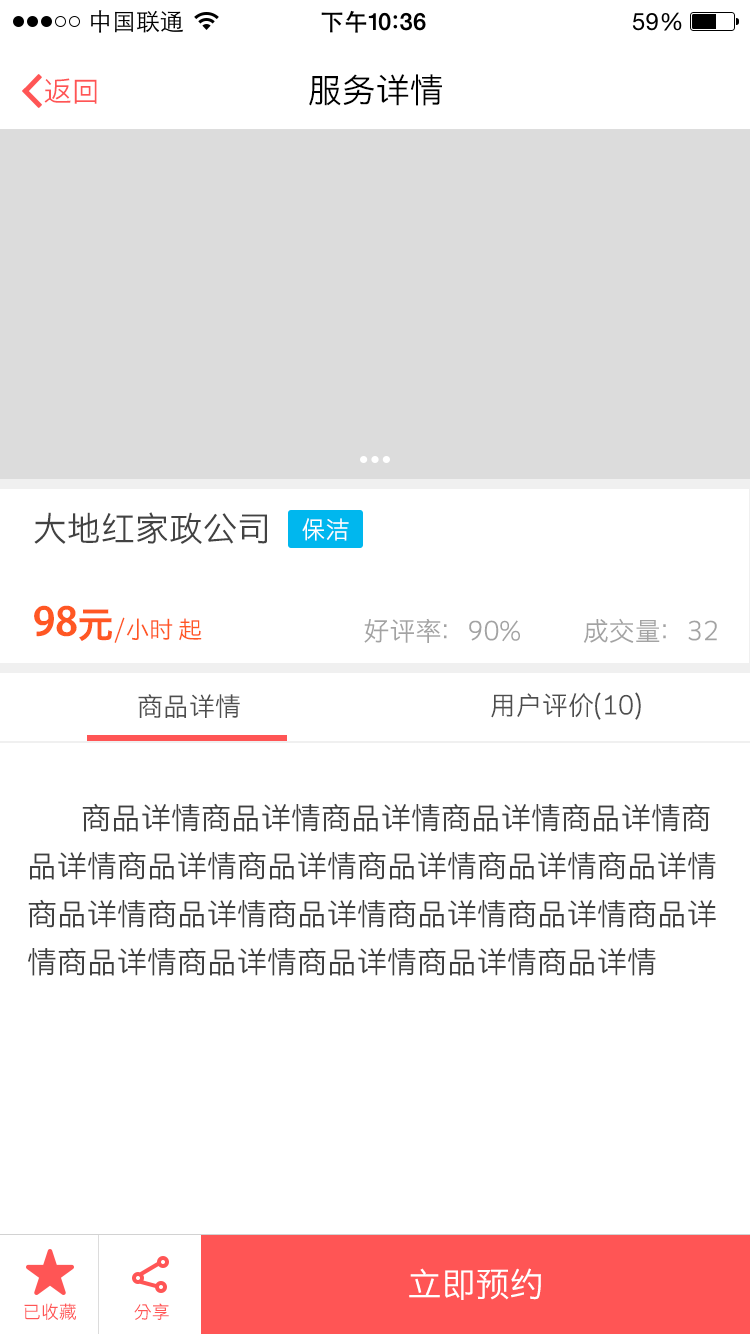
<style>
.page{position:relative;width:750px;height:1334px;background:#ffffff}
.page>*{position:absolute;margin:0}
.t1{font:28px "STHeitiSC-Light";color:#ff5555}
.t2{font:34px "STHeitiSC-Light";color:#000000}
.t3{font:34px "STHeitiSC-Light";color:#424242}
.t4{font:24px "STHeitiSC-Light";color:#ffffff}
.t5{font:24px "STHeitiSC-Light";color:#ff5723}
.t6{font:48px "STHeitiSC-Medium";color:#ff5723}
.t7{font:36px "STHeitiSC-Medium";color:#ff5723}
.t8{font:26px "STHeitiSC-Light";color:#a3a3a3}
.t9{font:26px "STHeitiSC-Light";color:#4e4e4e}
.t10{font:30px/48px "STHeitiSC-Light";color:#404040}
.t11{font:34px "STHeitiSC-Light";color:#ffffff}
.t12{font:18px "STHeitiSC-Light";color:#ff5555}
</style>
<div class="page">
<p class="t1" style="left:44px;top:78px;width:53px;height:26px">返回</p>
<p class="t2" style="left:309px;top:74px;width:133px;height:32px">服务详情</p>
<p class="t3" style="left:34px;top:512px;width:233px;height:32px">大地红家政公司</p>
<p class="t4" style="left:302px;top:518px;width:47px;height:23px">保洁</p>
<p class="t5" style="left:34px;top:605px;width:168px;height:38px"><span class="t6">98</span><span class="t7">元</span>/小时 起</p>
<p class="t8" style="left:364px;top:618px;width:353px;height:25px">好评率：90%            成交量：32</p>
<p class="t9" style="left:138px;top:694px;width:102px;height:24px">商品详情</p>
<p class="t9" style="left:491px;top:692px;width:150px;height:28px">用户评价(10)</p>
<p class="t10" style="left:28px;top:803px;width:688px;height:173px">商品详情商品详情商品详情商品详情商品详情商<br>品详情商品详情商品详情商品详情商品详情商品详情<br>商品详情商品详情商品详情商品详情商品详情商品详<br>情商品详情商品详情商品详情商品详情商品详情</p>
<p class="t11" style="left:409px;top:1268px;width:132px;height:32px">立即预约</p>
<p class="t12" style="left:24px;top:1303px;width:52px;height:17px">已收藏</p>
<p class="t12" style="left:134px;top:1303px;width:35px;height:17px">分享</p>
</div>
